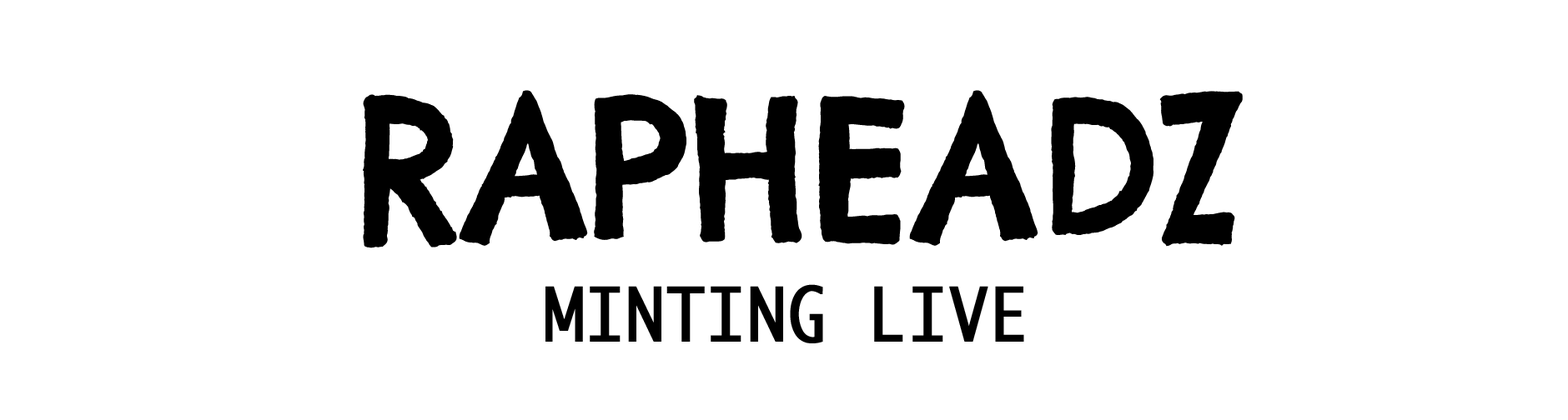
<style>
.page{position:relative;width:1568px;height:420px;background:#ffffff}
.page>*{position:absolute;margin:0}
.t1{font:191px "ChelseaMarket-Regular";color:#000000;font-weight:bold;scale:0.9 1}
.t2{font:71.7px "Ayuthaya";color:#000000;font-weight:bold;scale:0.9 1}
</style>
<div class="page">
<p class="t1" style="left:363px;top:90px;width:880px;height:159px">RAPHEADZ</p>
<p class="t2" style="left:545px;top:284px;width:479px;height:60px">MINTING LIVE</p>
</div>
